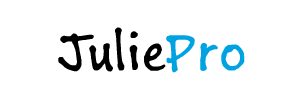
<style>
.page{position:relative;width:284px;height:100px;background:#ffffff}
.page>*{position:absolute;margin:0}
.t1{font:60px "BuxtonSketch";letter-spacing:0.029em;color:#000000}
.t2{font:60px "BuxtonSketch";letter-spacing:0.029em;color:#00a2e2}
</style>
<div class="page">
<p class="t1" style="left:58px;top:27px;width:187px;height:46px">Julie<span class="t2">Pro</span></p>
</div>
